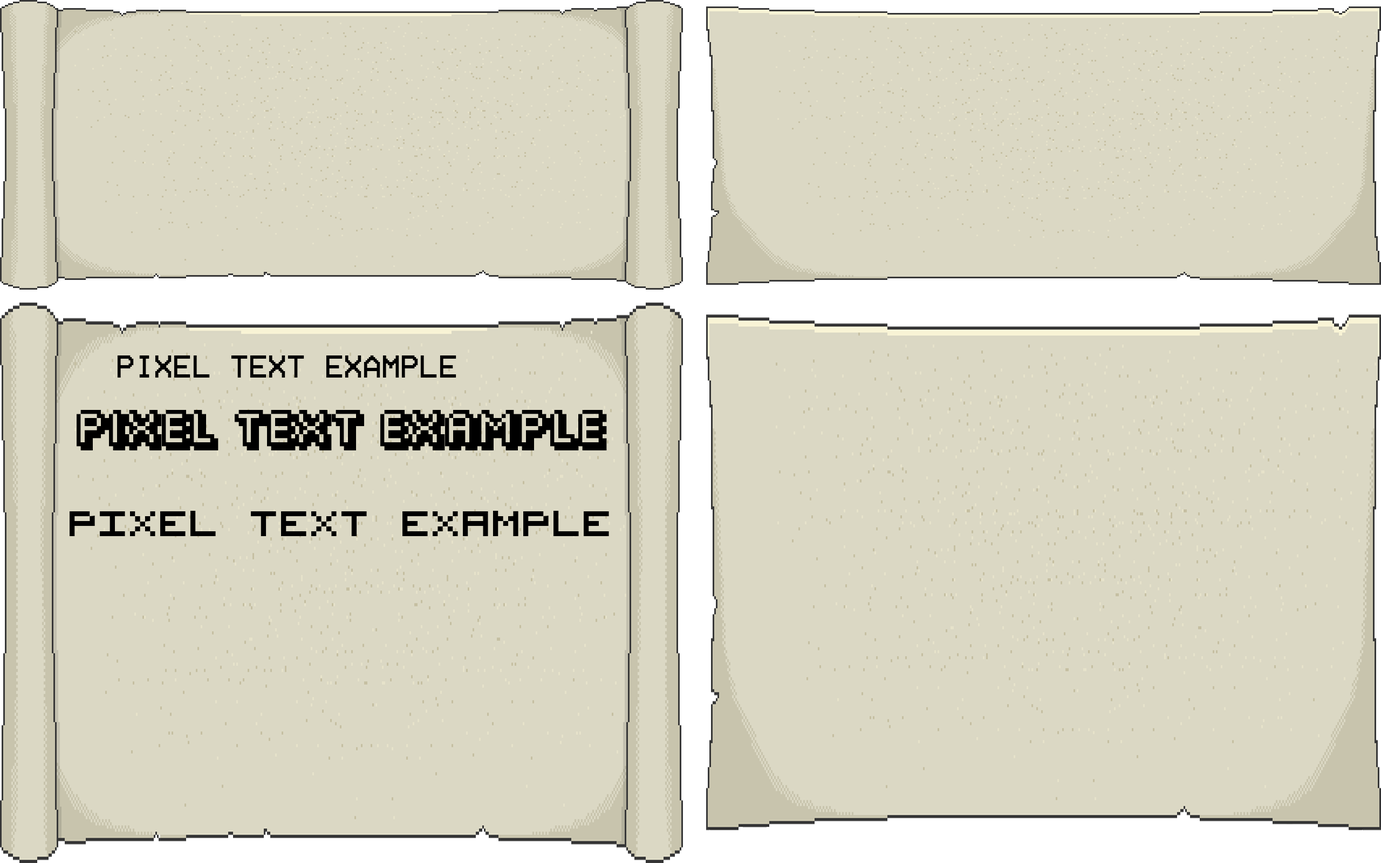
<style>
.page{position:relative;width:1381px;height:863px;background:#dbd8c4}
.page>*{position:absolute;margin:0}
.t1{font:32.4px "VCROSDMono";color:#000000}
.t2{font:32.5px "Fipps-Regular";color:#000000}
.t3{font:64.7px "VisitorTT2BRK";color:#000000}
</style>
<div class="page">
<p class="t1" style="left:117px;top:356px;width:339px;height:22px">PIXEL TEXT EXAMPLE</p>
<p class="t2" style="left:77px;top:410px;width:530px;height:41px">PIXEL TEXT EXAMPLE</p>
<p class="t3" style="left:70px;top:511px;width:539px;height:25px">PIXEL TEXT EXAMPLE</p>
</div>
